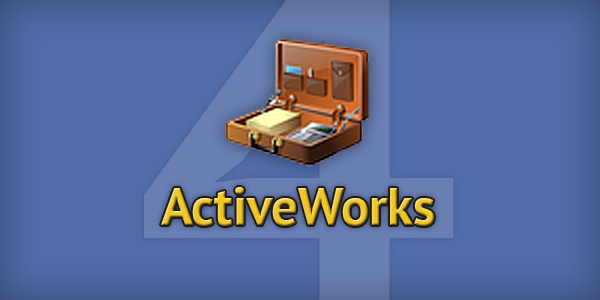
<style>
.page{position:relative;width:600px;height:300px;background:#516daa}
.page>*{position:absolute;margin:0}
.t1{font:52.6px "PTSans-Bold"}
</style>
<div class="page">
<p class="t1" style="left:161px;top:187px;width:273px;height:39px">ActiveWorks</p>
</div>
